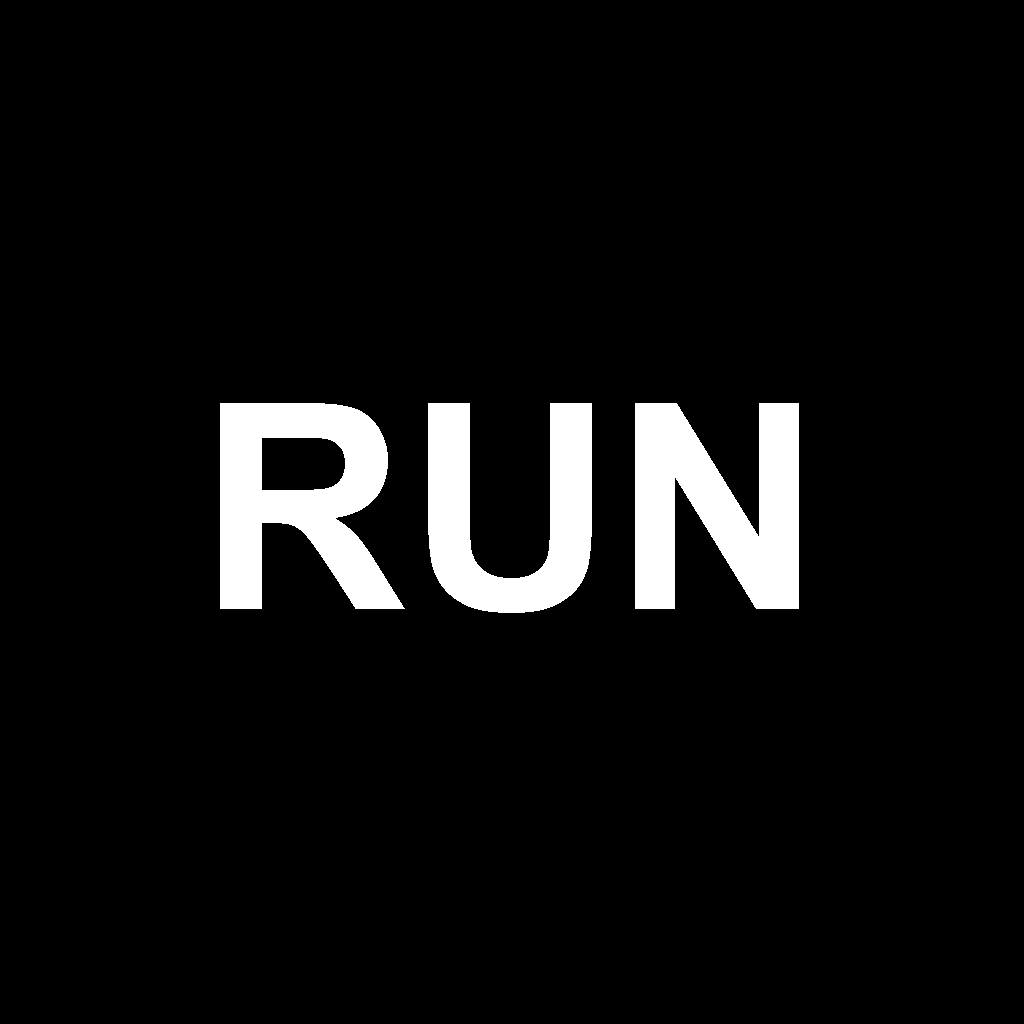
<style>
.page{position:relative;width:1024px;height:1024px;background:#000000}
.page>*{position:absolute;margin:0}
.t1{font:287.5px "Arial-BoldMT";color:#ffffff}
</style>
<div class="page">
<p class="t1" style="left:220px;top:403px;width:579px;height:210px">RUN</p>
</div>
